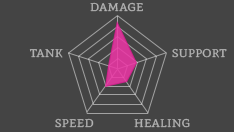
<style>
.page{position:relative;width:234px;height:132px;background:#444444}
.page>*{position:absolute;margin:0}
.t1{font:16px "MateSC-Regular";color:#b2b2b2}
</style>
<div class="page">
<p class="t1" style="left:90px;top:2px;width:53px;height:10px">damage</p>
<p class="t1" style="left:29px;top:49px;width:34px;height:9px">tank</p>
<p class="t1" style="left:172px;top:48px;width:55px;height:10px">support</p>
<p class="t1" style="left:55px;top:118px;width:39px;height:10px">speed</p>
<p class="t1" style="left:134px;top:118px;width:56px;height:10px">healing</p>
</div>
